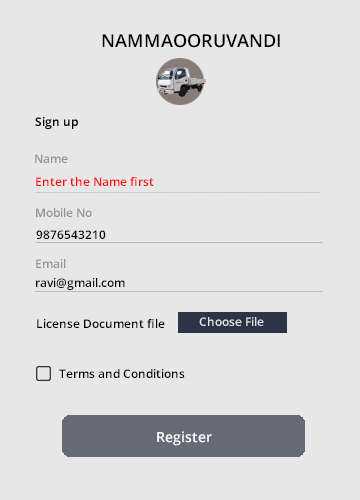
<style>
.page{position:relative;width:360px;height:500px;background:#e7e7e7}
.page>*{position:absolute;margin:0}
.t1{font:18px "OpenSans-Semibold";color:#000000}
.t2{font:12px "OpenSans-Semibold";color:#939393}
.t3{font:12px "OpenSans-Semibold";color:#fd0b0b}
.t4{font:12px "OpenSans-Semibold";color:#000000}
.t5{font:12px "OpenSans-Semibold";color:#e0e1e2}
.t6{font:14px "OpenSans-Semibold";color:#ffffff}
</style>
<div class="page">
<p class="t1" style="left:102px;top:34px;width:178px;height:14px">NAMMAOORUVANDI</p>
<p class="t2" style="left:35px;top:154px;width:33px;height:9px">Name</p>
<p class="t3" style="left:36px;top:177px;width:118px;height:9px">Enter the Name first</p>
<p class="t2" style="left:36px;top:208px;width:56px;height:9px">Mobile No</p>
<p class="t4" style="left:36px;top:230px;width:70px;height:9px">9876543210</p>
<p class="t2" style="left:36px;top:259px;width:30px;height:9px">Email</p>
<p class="t4" style="left:36px;top:278px;width:89px;height:12px">ravi@gmail.com</p>
<p class="t5" style="left:199px;top:317px;width:65px;height:9px">Choose File</p>
<p class="t4" style="left:37px;top:319px;width:128px;height:9px">License Document file</p>
<p class="t4" style="left:59px;top:369px;width:126px;height:9px">Terms and Conditions</p>
<p class="t6" style="left:157px;top:431px;width:55px;height:15px">Register</p>
</div>
